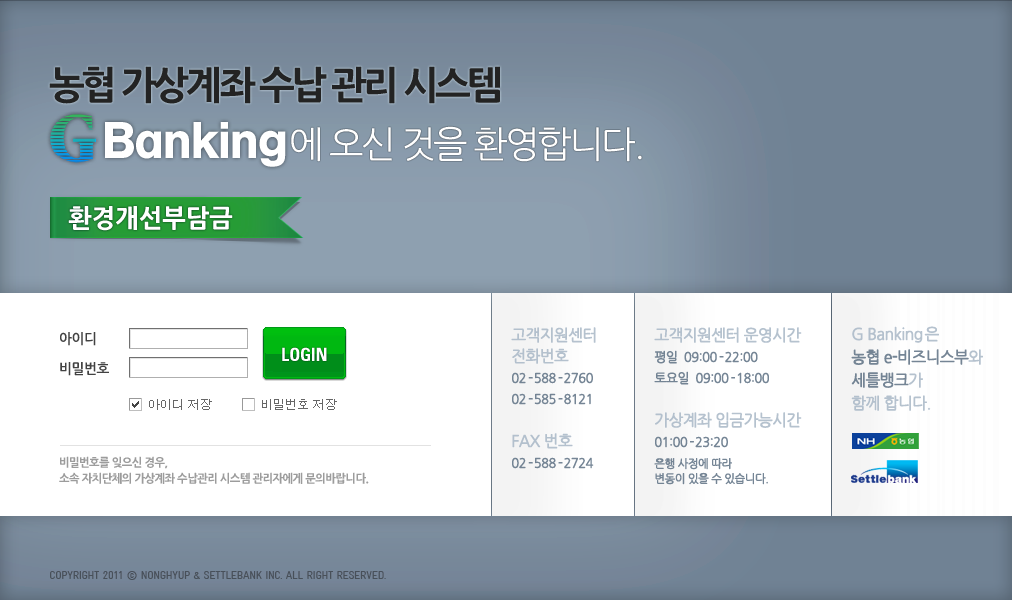
<style>
.page{position:relative;width:1012px;height:600px;background:#ffffff}
.page>*{position:absolute;margin:0}
.t1{font:38px "NanumGothicOTFExtraBold";letter-spacing:-0.09em;color:#232323}
.t2{font:36.9px "NanumGothicOTF";letter-spacing:-0.07em;color:#ffffff}
.t3{font:25px "NanumGothicOTFExtraBold";color:#ffffff}
.t4{font:16px/15px "NanumGothicOTF";letter-spacing:-0.05em;color:#a8b7c6;font-weight:bold;scale:0.97 1}
.t5{font:13px/21px "NanumGothicOTF";letter-spacing:-0.05em;color:#5d7083;font-weight:bold;scale:0.97 1}
.t6{font:13px/21px "NanumGothicOTF";letter-spacing:-0.13em;color:#5d7083;font-weight:bold;scale:0.97 1}
.t7{font:16px/23px "NanumGothicOTF";letter-spacing:-0.05em;color:#a8b7c6;font-weight:bold;scale:0.97 1}
.t8{font:16px/23px "NanumGothicOTF";letter-spacing:-0.05em;color:#5d7083;font-weight:bold;scale:0.97 1}
.t9{font:14px/30px "NanumGothicOTFBold";letter-spacing:-0.03em;color:#424242}
.t10{font:12px "Dotum";color:#666666;text-transform:uppercase}
.t11{font:11.5px/15px "NanumGothicOTF";letter-spacing:-0.05em;color:#5d7083;font-weight:bold;scale:0.97 1}
.t12{font:16px/21px "NanumGothicOTF";letter-spacing:-0.05em;color:#a8b7c6;font-weight:bold;scale:0.97 1}
.t13{font:11.5px/21px "NanumGothicOTF";letter-spacing:-0.05em;color:#5d7083;font-weight:bold;scale:0.97 1}
.t14{font:16px/25px "NanumGothicOTF";letter-spacing:-0.05em;color:#a8b7c6;font-weight:bold;scale:0.97 1}
.t15{font:11.5px/15.8px "NanumGothicOTFExtraBold";letter-spacing:-0.05em;color:#9c9c9c}
</style>
<div class="page">
<p class="t1" style="left:49px;top:66px;width:451px;height:38px">농협 가상계좌 수납 관리 시스템</p>
<p class="t2" style="left:291px;top:126px;width:351px;height:36px">에 오신 것을 환영합니다.</p>
<p class="t3" style="left:68px;top:206px;width:165px;height:25px">환경개선부담금</p>
<p class="t4" style="left:511px;top:327px;width:85px;height:78px;opacity:0.85">고객지원센터<br>전화번호  <br><span class="t5">02</span><span class="t6"> - </span><span class="t5">588</span><span class="t6"> - </span><span class="t5">2760<br>02</span><span class="t6"> - </span><span class="t5">585</span><span class="t6"> - </span><span class="t5">8121</span></p>
<p class="t5" style="left:654px;top:327px;width:148px;height:58px;opacity:0.85"><span class="t4">고객지원센터 운영시간            <br></span>평일  09:00<span class="t6"> - </span>22:00<br>토요일  09:00<span class="t6"> - </span>18:00</p>
<p class="t7" style="left:851px;top:326px;width:132px;height:85px;opacity:0.85">G Banking 은 <br><span class="t8">농협 e-비즈니스부</span>와 <br><span class="t8">세틀뱅크</span>가 <br>함께 합니다.</p>
<p class="t9" style="left:60px;top:332px;width:49px;height:44px">아이디<br>비밀번호</p>
<p class="t10" style="left:149px;top:399px;width:63px;height:11px">아이디 저장</p>
<p class="t10" style="left:262px;top:399px;width:75px;height:11px">비밀번호 저장</p>
<p class="t11" style="left:654px;top:412px;width:148px;height:73px;opacity:0.85"><span class="t12">가상계좌 입금가능시간     <br></span><span class="t5">01:00</span><span class="t6"> - </span><span class="t5">23:20 <br></span><span class="t13">은행 사정에 따라 <br></span>변동이 있을 수 있습니다.</p>
<p class="t14" style="left:512px;top:433px;width:82px;height:36px;opacity:0.85">FAX 번호<br><span class="t5">02</span><span class="t6"> - </span><span class="t5">588</span><span class="t6"> - </span><span class="t5">2724</span></p>
<p class="t15" style="left:59px;top:456px;width:310px;height:28px">비밀번호를 잊으신 경우, <br>소속 자치단체의 가상계좌 수납관리 시스템 관리자에게 문의바랍니다.</p>
</div>
